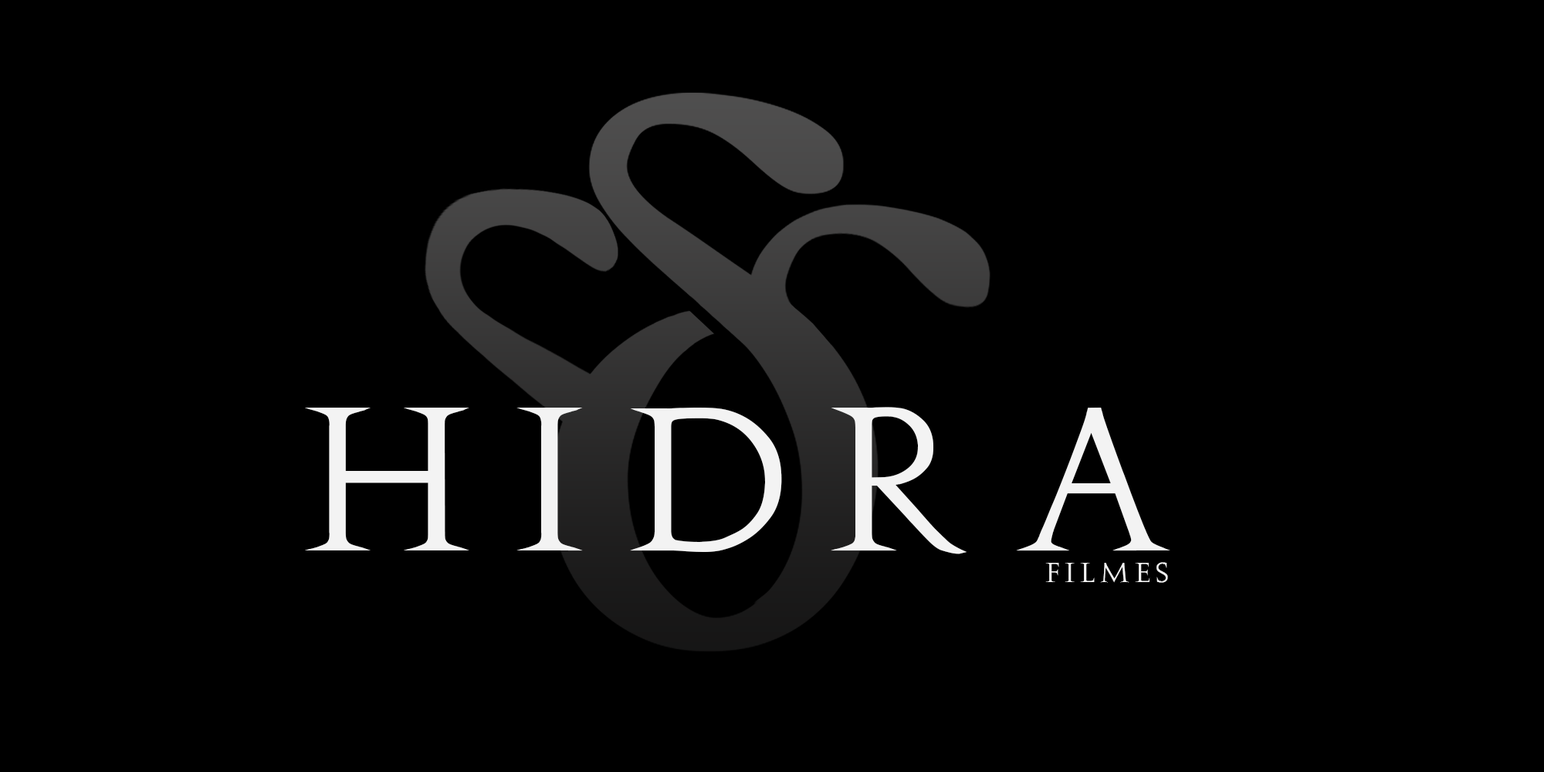
<style>
.page{position:relative;width:1544px;height:772px;background:#000000}
.page>*{position:absolute;margin:0}
.t1{font:192.7px "Augustus";letter-spacing:0.2em;color:#f3f3f3}
.t2{font:26.3px "Augustus";letter-spacing:0.2em;color:#f3f3f3}
</style>
<div class="page">
<p class="t1" style="left:305px;top:407px;width:866px;height:147px">Hidra</p>
<p class="t2" style="left:1045px;top:562px;width:123px;height:21px">Filmes</p>
</div>
